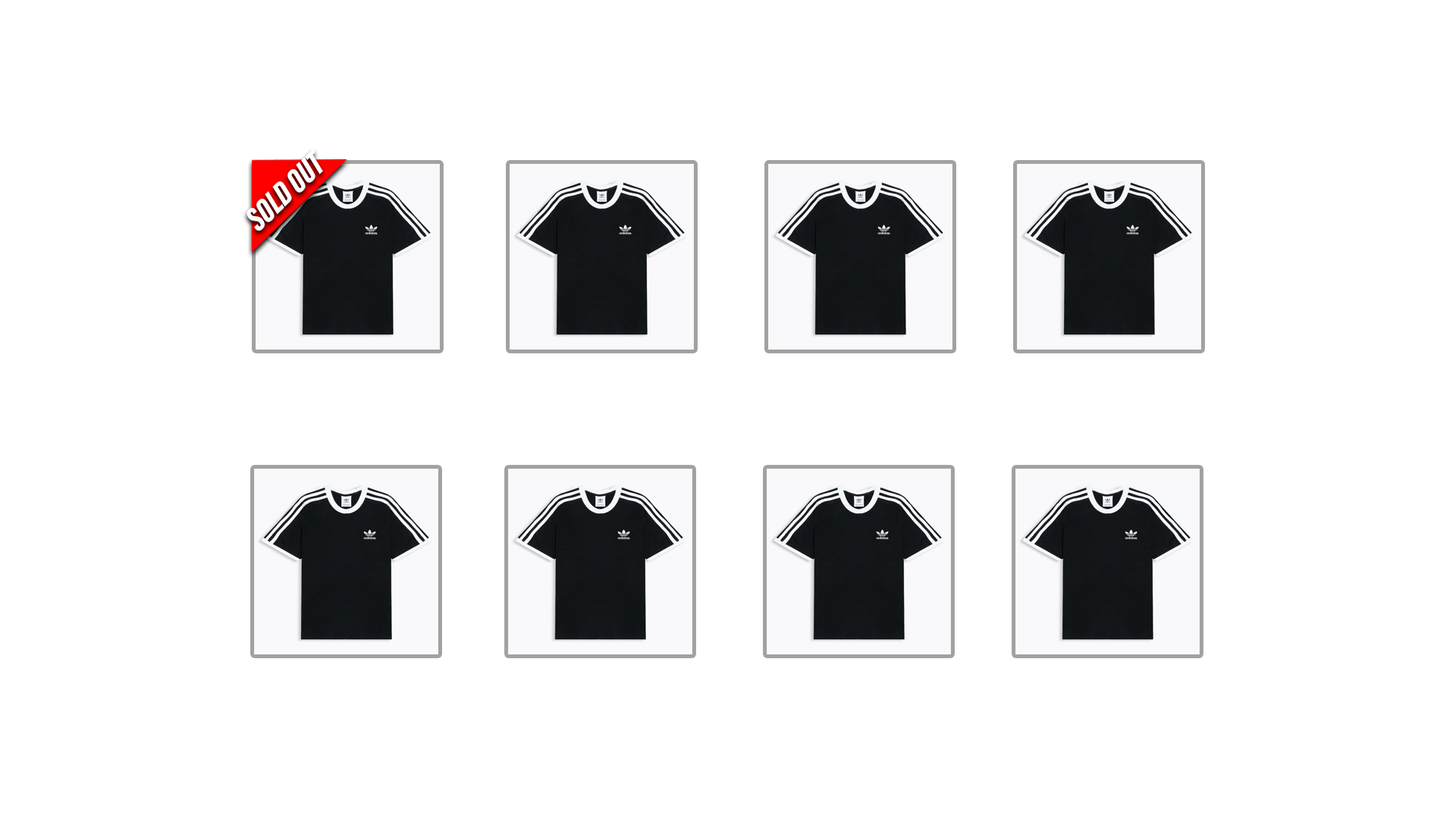
<style>
.page{position:relative;width:1456px;height:819px;background:#ffffff}
.page>*{position:absolute;margin:0}
.t1{font:34px "AcuminConcept-ExtraCondensedBlackItalic";color:#ffffff}
</style>
<div class="page">
<p class="t1" style="left:246px;top:149px;width:77px;height:82px;rotate:-43deg">SOLD OUT</p>
</div>
